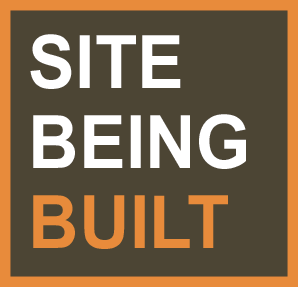
<style>
.page{position:relative;width:298px;height:287px;background:#4c4534}
.page>*{position:absolute;margin:0}
.t1{font:73.5px/80px "Arial-BoldMT";color:#ffffff;scale:0.95 1}
.t2{font:73.5px/80px "Arial-BoldMT";color:#e88b3b;scale:0.95 1}
</style>
<div class="page">
<p class="t1" style="left:30px;top:34px;width:216px;height:215px">SITE <br>BEING<br><span class="t2">BUILT</span></p>
</div>
